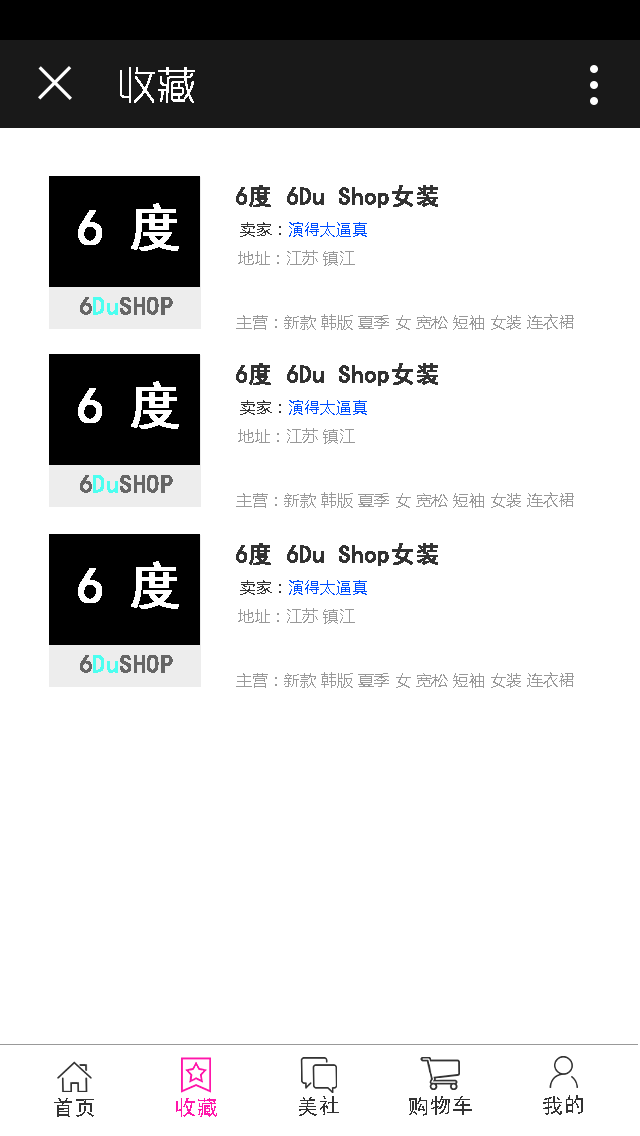
<style>
.page{position:relative;width:640px;height:1136px;background:#ffffff}
.page>*{position:absolute;margin:0}
.t1{font:38px "RTWSYueGoG0v1-ExLight";color:#ffffff;font-weight:bold}
.t2{font:24px "SimHei";color:#333333;font-weight:bold}
.t3{font:50.7px "SimHei";color:#ffffff;font-weight:bold}
.t4{font:16px "MicrosoftYaHei";color:#004eff}
.t5{font:16px "MicrosoftYaHei";color:#333333}
.t6{font:16px "MicrosoftYaHei";color:#999999}
.t7{font:25.4px "SimHei";color:#666666;font-weight:bold}
.t8{font:25.4px "SimHei";color:#4cfff0;font-weight:bold}
.t9{font:36px "SimHei";color:#333333}
.t10{font:36px "SimHei";color:#ff16aa}
</style>
<div class="page">
<p class="t1" style="left:120px;top:67px;width:75px;height:36px">收藏</p>
<p class="t2" style="left:236px;top:185px;width:202px;height:23px">6度 6Du Shop女装</p>
<p class="t3" style="left:78px;top:203px;width:101px;height:48px">6 度</p>
<p class="t4" style="left:240px;top:222px;width:127px;height:15px"><span class="t5">卖家：</span>演得太逼真</p>
<p class="t6" style="left:238px;top:250px;width:117px;height:16px">地址：江苏 镇江</p>
<p class="t7" style="left:80px;top:297px;width:93px;height:18px">6<span class="t8">Du</span>SHOP</p>
<p class="t6" style="left:236px;top:314px;width:338px;height:16px">主营：新款 韩版 夏季 女 宽松 短袖 女装 连衣裙</p>
<p class="t2" style="left:236px;top:363px;width:202px;height:23px">6度 6Du Shop女装</p>
<p class="t3" style="left:78px;top:381px;width:101px;height:48px">6 度</p>
<p class="t4" style="left:240px;top:400px;width:127px;height:15px"><span class="t5">卖家：</span>演得太逼真</p>
<p class="t6" style="left:238px;top:428px;width:117px;height:16px">地址：江苏 镇江</p>
<p class="t7" style="left:80px;top:475px;width:93px;height:18px">6<span class="t8">Du</span>SHOP</p>
<p class="t6" style="left:236px;top:492px;width:338px;height:16px">主营：新款 韩版 夏季 女 宽松 短袖 女装 连衣裙</p>
<p class="t2" style="left:236px;top:543px;width:202px;height:23px">6度 6Du Shop女装</p>
<p class="t3" style="left:78px;top:561px;width:101px;height:48px">6 度</p>
<p class="t4" style="left:240px;top:580px;width:127px;height:15px"><span class="t5">卖家：</span>演得太逼真</p>
<p class="t6" style="left:238px;top:608px;width:117px;height:16px">地址：江苏 镇江</p>
<p class="t7" style="left:80px;top:655px;width:93px;height:18px">6<span class="t8">Du</span>SHOP</p>
<p class="t6" style="left:236px;top:672px;width:338px;height:16px">主营：新款 韩版 夏季 女 宽松 短袖 女装 连衣裙</p>
<p class="t9" style="left:299px;top:1096px;width:40px;height:20px;rotate:-1deg">美社</p>
<p class="t9" style="left:409px;top:1096px;width:63px;height:20px;rotate:-1deg">购物车</p>
<p class="t9" style="left:543px;top:1095px;width:40px;height:20px;rotate:-1deg">我的</p>
<p class="t9" style="left:54px;top:1098px;width:40px;height:19px;rotate:-1deg">首页</p>
<p class="t10" style="left:176px;top:1098px;width:41px;height:19px;rotate:-1deg">收藏</p>
</div>
